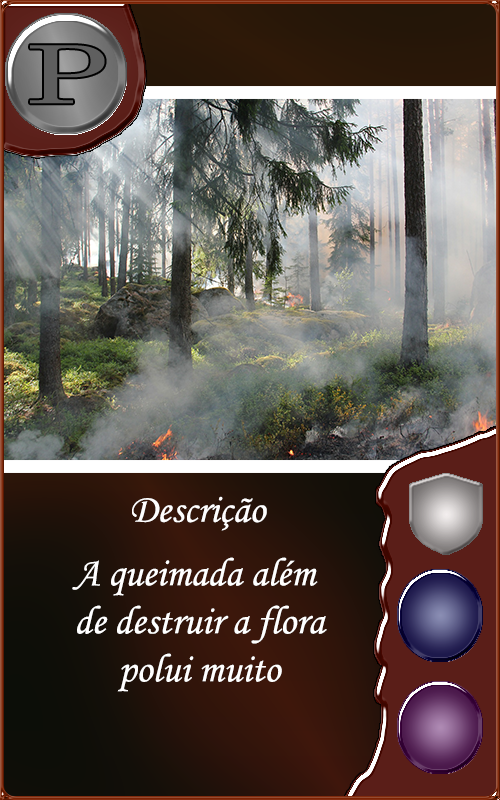
<style>
.page{position:relative;width:500px;height:800px}
.page>*{position:absolute;margin:0}
.t1{font:40px "MonotypeCorsiva";color:#fffefe}
.t2{font:40px "MonotypeCorsiva";color:#ffffff}
</style>
<div class="page">
<p class="t1" style="left:132px;top:496px;width:135px;height:35px">Descrição</p>
<p class="t2" style="left:72px;top:557px;width:255px;height:135px;text-align:center">A queimada além <br>de destruir a flora<br>polui muito</p>
</div>
